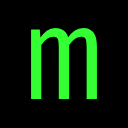
<style>
.page{position:relative;width:128px;height:128px;background:#000000}
.page>*{position:absolute;margin:0}
.t1{font:132px "FiraCode-Regular";color:#33ff33}
</style>
<div class="page">
<p class="t1" style="left:31px;top:28px;width:66px;height:71px">m</p>
</div>
